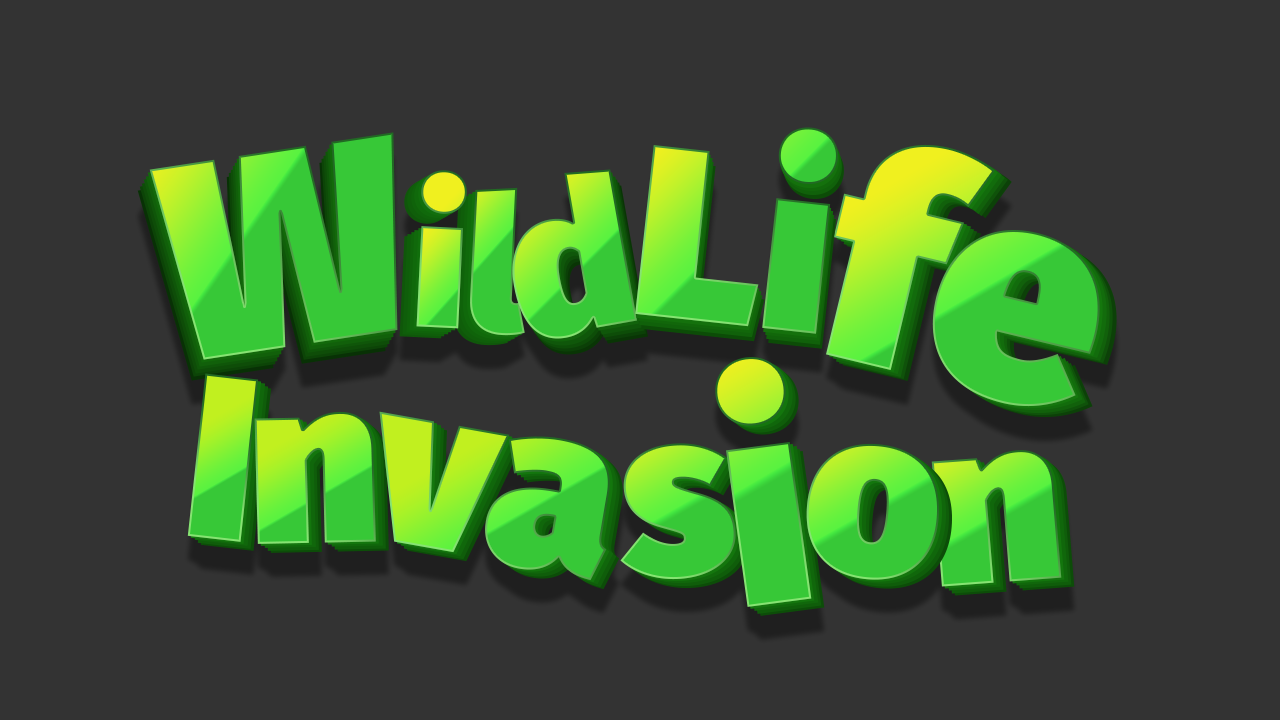
<style>
.page{position:relative;width:1280px;height:720px;background:#333333}
.page>*{position:absolute;margin:0}
.t1{font:280.6px "FiraSans-Ultra"}
.t2{font:243.2px "FiraSans-Ultra"}
.t3{font:299.3px "FiraSans-Ultra"}
.t4{font:187.1px "FiraSans-Ultra"}
.t5{font:205.8px "FiraSans-Ultra"}
.t6{font:294.6px "FiraSans-Ultra"}
.t7{font:233.7px "FiraSans-Ultra"}
.t8{font:233.8px "FiraSans-Ultra"}
</style>
<div class="page">
<p class="t1" style="left:149px;top:132px;width:249px;height:228px;rotate:-9deg">W</p>
<p class="t2" style="left:635px;top:127px;width:203px;height:207px;rotate:6deg">Li</p>
<p class="t3" style="left:826px;top:144px;width:274px;height:263px;rotate:14deg">fe</p>
<p class="t4" style="left:416px;top:170px;width:109px;height:166px;rotate:3deg">il</p>
<p class="t5" style="left:512px;top:169px;width:125px;height:170px;rotate:-10deg">d</p>
<p class="t6" style="left:715px;top:357px;width:97px;height:250px;rotate:-8deg">i</p>
<p class="t7" style="left:187px;top:373px;width:72px;height:169px;rotate:7deg">I</p>
<p class="t7" style="left:254px;top:411px;width:122px;height:133px;rotate:-1deg">n</p>
<p class="t7" style="left:379px;top:411px;width:231px;height:170px;rotate:10deg">va</p>
<p class="t7" style="left:620px;top:443px;width:116px;height:137px;rotate:-2deg">s</p>
<p class="t8" style="left:806px;top:443px;width:133px;height:137px;rotate:5deg">o</p>
<p class="t8" style="left:931px;top:450px;width:131px;height:137px;rotate:-4deg">n</p>
</div>
